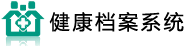
<style>
.page{position:relative;width:190px;height:46px;background:#ffffff}
.page>*{position:absolute;margin:0}
.t1{font:20px "MicrosoftYaHei";letter-spacing:0.14em;color:#000000}
</style>
<div class="page">
<p class="t1" style="left:49px;top:12px;width:135px;height:20px">健康档案系统</p>
</div>
